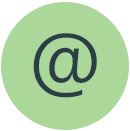
<style>
.page{position:relative;width:130px;height:131px;background:#abd79b}
.page>*{position:absolute;margin:0}
.t1{font:80px "MicrosoftPhagsPa";color:#2b3e46}
</style>
<div class="page">
<p class="t1" style="left:33px;top:33px;width:64px;height:65px">@</p>
</div>
